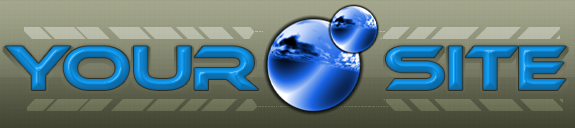
<style>
.page{position:relative;width:575px;height:128px}
.page>*{position:absolute;margin:0}
.t1{font:60px "Ethnocentric"}
</style>
<div class="page">
<p class="t1" style="left:5px;top:46px;width:561px;height:44px">your     site</p>
</div>
